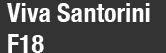
<style>
.page{position:relative;width:166px;height:53px;background:#333333}
.page>*{position:absolute;margin:0}
.t1{font:26.1px "HelveticaNeue-CondensedBold";color:#fefefe}
</style>
<div class="page">
<p class="t1" style="left:7px;top:3px;width:143px;height:50px">Viva Santorini <br>F18</p>
</div>
